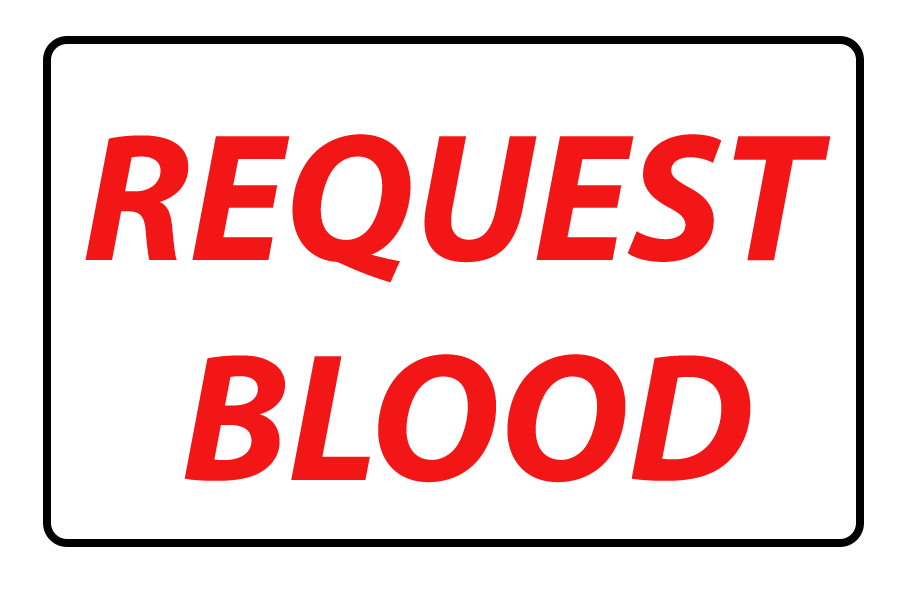
<style>
.page{position:relative;width:900px;height:600px;background:#ffffff}
.page>*{position:absolute;margin:0}
.t1{font:183.3px "MyriadPro-BoldIt";color:#f31616}
</style>
<div class="page">
<p class="t1" style="left:85px;top:134px;width:746px;height:349px;text-align:center">REQUEST <br>BLOOD</p>
</div>
